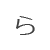
<style>
.page{position:relative;width:50px;height:50px;background:#ffffff}
.page>*{position:absolute;margin:0}
.t1{font:24px "Meiryo";color:#404040}
</style>
<div class="page">
<p class="t1" style="left:16px;top:16px;width:19px;height:19px">ら</p>
</div>
